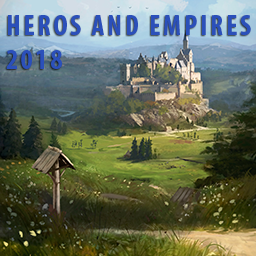
<style>
.page{position:relative;width:256px;height:256px}
.page>*{position:absolute;margin:0}
.t1{font:28.4px "MyriadPro-BoldCond";letter-spacing:0.1em;color:#2b50ba;text-transform:uppercase}
</style>
<div class="page">
<p class="t1" style="left:6px;top:15px;width:245px;height:54px">Heros And Empires<br>2018</p>
</div>
